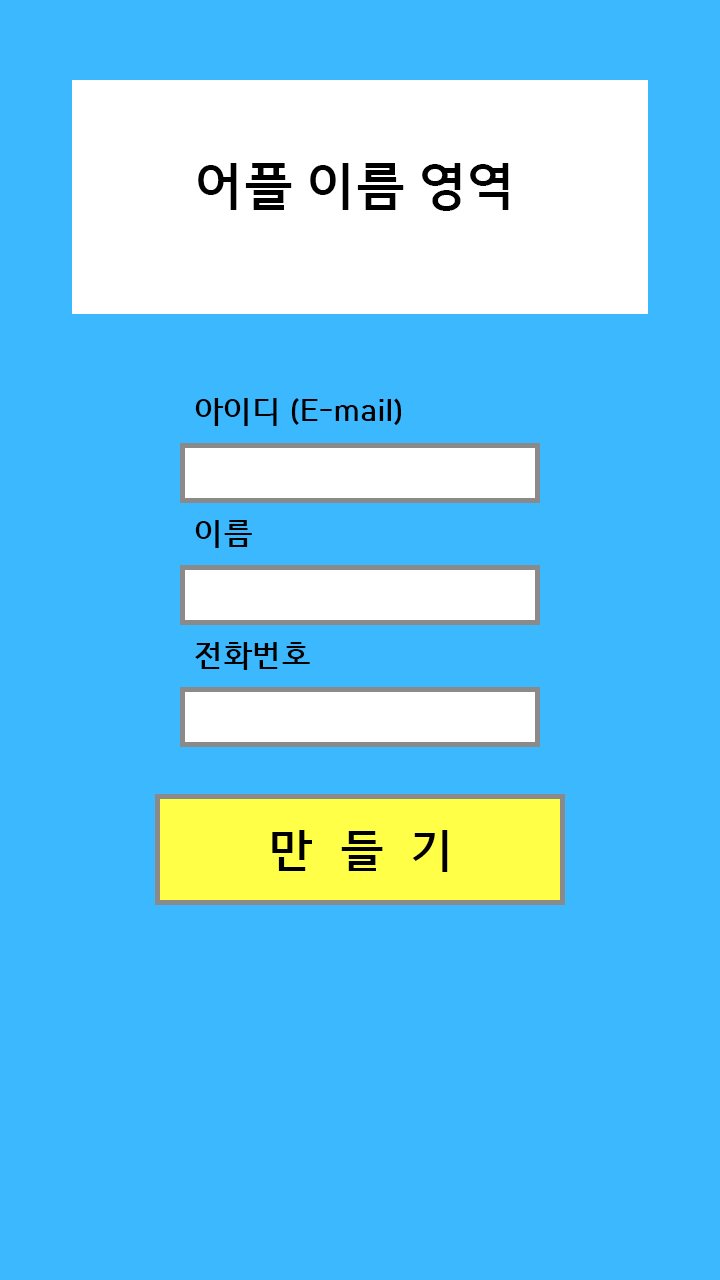
<style>
.page{position:relative;width:720px;height:1280px;background:#3cb8ff}
.page>*{position:absolute;margin:0}
.t1{font:50px "HCRDotum-Bold";color:#000000}
.t2{font:30px "HCRDotum-Bold";color:#000000}
.t3{font:45px "HCRDotum-Bold";color:#000000}
</style>
<div class="page">
<p class="t1" style="left:198px;top:163px;width:311px;height:48px">어플 이름 영역</p>
<p class="t2" style="left:195px;top:398px;width:206px;height:28px">아이디 (E-mail)</p>
<p class="t2" style="left:195px;top:520px;width:57px;height:28px">이름</p>
<p class="t2" style="left:195px;top:642px;width:115px;height:28px">전화번호</p>
<p class="t3" style="left:272px;top:830px;width:176px;height:42px">만  들  기</p>
</div>
